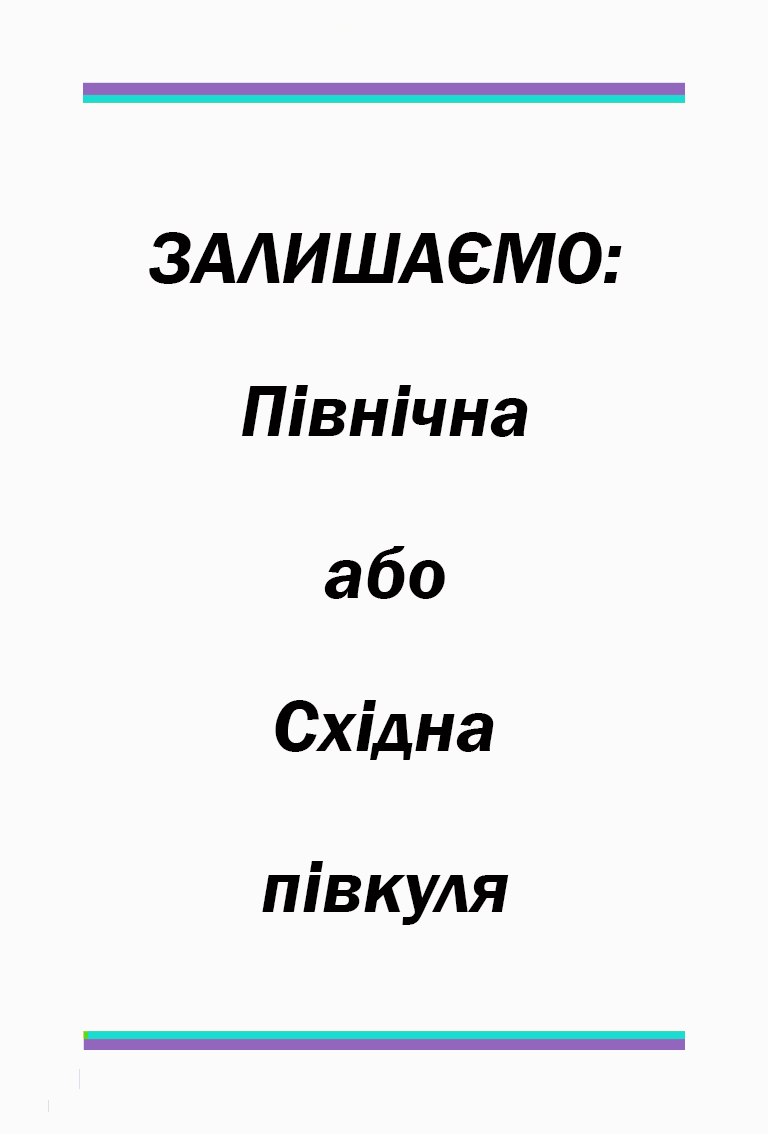
<style>
.page{position:relative;width:768px;height:1134px;background:#fbfbfb}
.page>*{position:absolute;margin:0}
.t1{font:75px "FranklinGothic-DemiItalic";color:#020000}
</style>
<div class="page">
<p class="t1" style="left:149px;top:232px;width:473px;height:52px">ЗАЛИШАЄМО:</p>
<p class="t1" style="left:241px;top:385px;width:287px;height:52px">Північна</p>
<p class="t1" style="left:324px;top:546px;width:121px;height:53px">або</p>
<p class="t1" style="left:275px;top:700px;width:219px;height:60px">Східна</p>
<p class="t1" style="left:262px;top:861px;width:247px;height:64px">півкуля</p>
</div>
